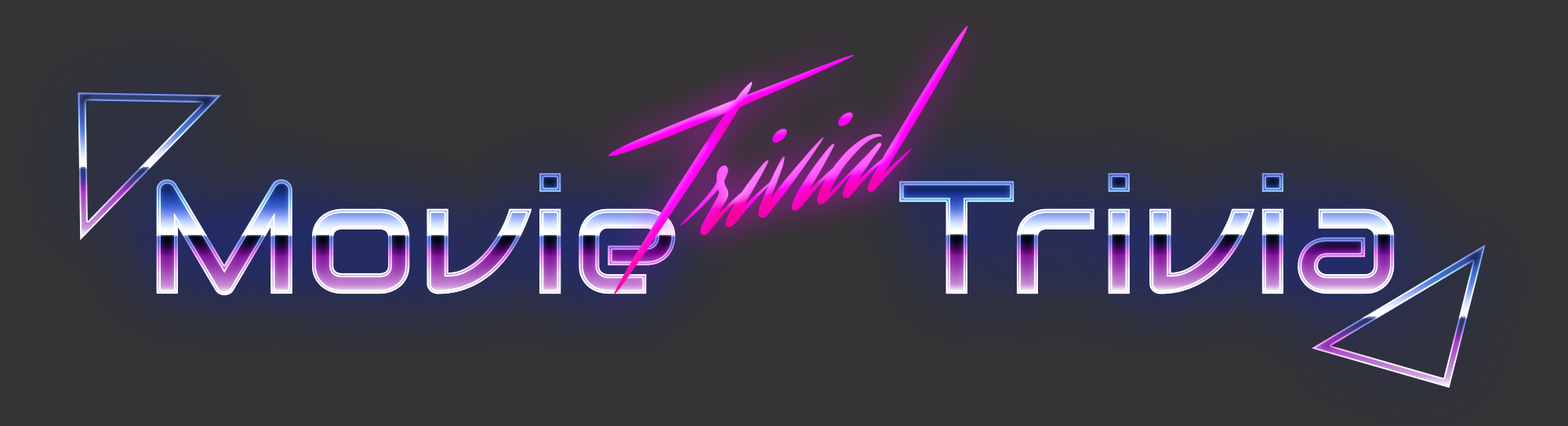
<style>
.page{position:relative;width:1568px;height:426px;background:#333333}
.page>*{position:absolute;margin:0}
.t1{font:159.9px "Streamster"}
.t2{font:160.7px "Audiowide-Regular";scale:1.03 1}
</style>
<div class="page">
<p class="t1" style="left:608px;top:26px;width:360px;height:269px;rotate:-14deg">Trivial</p>
<p class="t2" style="left:156px;top:173px;width:520px;height:123px">Movie</p>
<p class="t2" style="left:899px;top:173px;width:496px;height:122px">Trivia</p>
</div>
